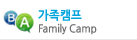
<style>
.page{position:relative;width:137px;height:40px;background:#ffffff}
.page>*{position:absolute;margin:0}
.t1{font:12px "NanumGothicBold";letter-spacing:0.025em;color:#00a4dc;scale:0.95 1}
.t2{font:11px "NanumGothicBold";letter-spacing:-0.025em;color:#6e6e6e;scale:0.95 1}
</style>
<div class="page">
<p class="t1" style="left:38px;top:9px;width:44px;height:12px">가족캠프</p>
<p class="t2" style="left:39px;top:23px;width:58px;height:12px">Family Camp</p>
</div>
